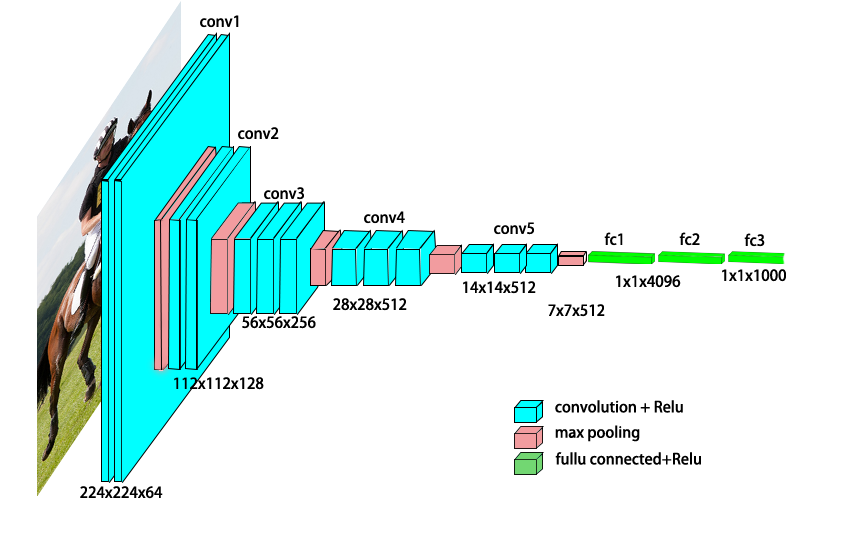
<style>
.page{position:relative;width:850px;height:540px;background:#ffffff}
.page>*{position:absolute;margin:0}
.t1{font:15px "AdobeHeitiStd-Regular";color:#000000}
</style>
<div class="page">
<p class="t1" style="left:200px;top:15px;width:39px;height:13px">conv1</p>
<p class="t1" style="left:238px;top:127px;width:41px;height:13px">conv2</p>
<p class="t1" style="left:264px;top:187px;width:40px;height:13px">conv3</p>
<p class="t1" style="left:364px;top:211px;width:41px;height:13px">conv4</p>
<p class="t1" style="left:494px;top:222px;width:40px;height:13px">conv5</p>
<p class="t1" style="left:604px;top:232px;width:19px;height:14px">fc1</p>
<p class="t1" style="left:679px;top:232px;width:21px;height:14px">fc2</p>
<p class="t1" style="left:744px;top:233px;width:21px;height:14px">fc3</p>
<p class="t1" style="left:722px;top:269px;width:64px;height:13px">1x1x1000</p>
<p class="t1" style="left:463px;top:281px;width:73px;height:13px">14x14x512</p>
<p class="t1" style="left:616px;top:275px;width:65px;height:13px">1x1x4096</p>
<p class="t1" style="left:333px;top:298px;width:74px;height:13px">28x28x512</p>
<p class="t1" style="left:548px;top:304px;width:57px;height:13px">7x7x512</p>
<p class="t1" style="left:242px;top:316px;width:74px;height:13px">56x56x256</p>
<p class="t1" style="left:174px;top:377px;width:90px;height:13px">112x112x128</p>
<p class="t1" style="left:555px;top:400px;width:128px;height:13px">convolution + Relu</p>
<p class="t1" style="left:555px;top:425px;width:85px;height:17px">max pooling</p>
<p class="t1" style="left:555px;top:452px;width:146px;height:13px">fullu connected+Relu</p>
<p class="t1" style="left:80px;top:486px;width:83px;height:13px">224x224x64</p>
</div>
